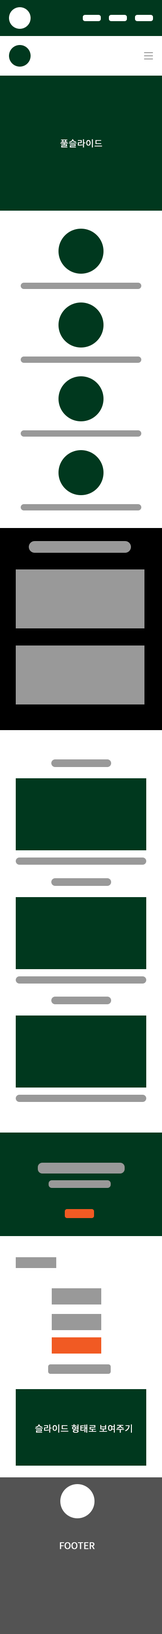
<style>
.page{position:relative;width:162px;height:1634px;background:#ffffff}
.page>*{position:absolute;margin:0}
.t1{font:9px "NotoSansKR-Regular";color:#ffffff;font-weight:bold}
</style>
<div class="page">
<p class="t1" style="left:60px;top:139px;width:42px;height:9px">풀슬라이드</p>
<p class="t1" style="left:35px;top:1424px;width:97px;height:8px">슬라이드 형태로 보여주기</p>
<p class="t1" style="left:60px;top:1542px;width:35px;height:7px">FOOTER</p>
</div>
